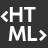
<style>
.page{position:relative;width:48px;height:48px;background:#333333}
.page>*{position:absolute;margin:0}
.t1{font:20px "CocoGothic-Bold";color:#ffffff}
</style>
<div class="page">
<p class="t1" style="left:0px;top:7px;width:36px;height:15px">&lt;HT</p>
<p class="t1" style="left:8px;top:26px;width:39px;height:15px">ML&gt;</p>
</div>
